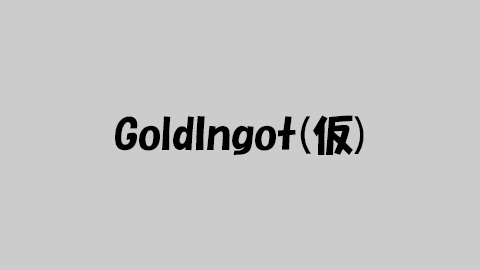
<style>
.page{position:relative;width:480px;height:270px;background:#cccccc}
.page>*{position:absolute;margin:0}
.t1{font:41.7px "HGPSoeiKakupoptai";color:#000000}
</style>
<div class="page">
<p class="t1" style="left:115px;top:115px;width:249px;height:40px">GoldIngot(仮)</p>
</div>
